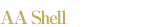
<style>
.page{position:relative;width:156px;height:27px;background:#ffffff}
.page>*{position:absolute;margin:0}
.t1{font:18px "RyuminPro-ExBold";letter-spacing:-0.08em;color:#c4a956}
</style>
<div class="page">
<p class="t1" style="left:0px;top:10px;width:67px;height:15px">AA Shell</p>
</div>
